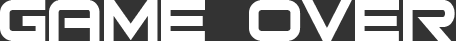
<style>
.page{position:relative;width:456px;height:41px;background:#ffffff}
.page>*{position:absolute;margin:0}
.t1{font:80px "Bitsumishi";color:#ffffff}
</style>
<div class="page">
<p class="t1" style="left:0px;top:0px;width:455px;height:41px">Game Over</p>
</div>
